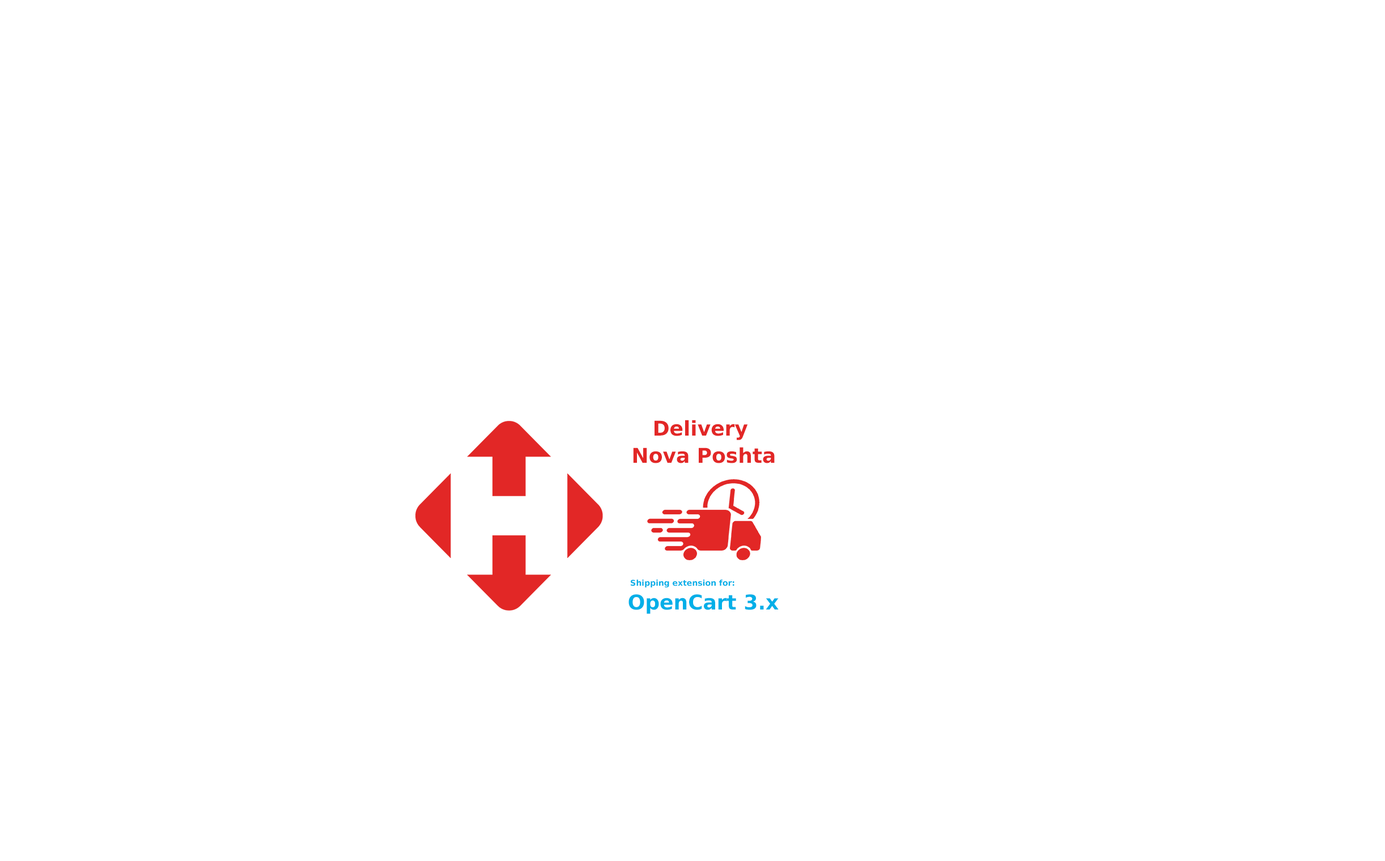
<style>
.page{position:relative;width:1385px;height:861px;background:#ffffff}
.page>*{position:absolute;margin:0}
.t1{font:20.4px/27.2px "DejaVuSans-Bold";color:#e22726}
.t2{font:7.9px "DejaVuSans-Bold";color:#01afe8}
.t3{font:20.4px "DejaVuSans-Bold";color:#01afe8}
</style>
<div class="page">
<p class="t1" style="left:633px;top:420px;width:141px;height:43px;text-align:center">Delivery <br>Nova Poshta</p>
<p class="t2" style="left:631px;top:580px;width:103px;height:8px">Shipping extension for:</p>
<p class="t3" style="left:628px;top:594px;width:150px;height:20px">OpenCart 3.x</p>
</div>
